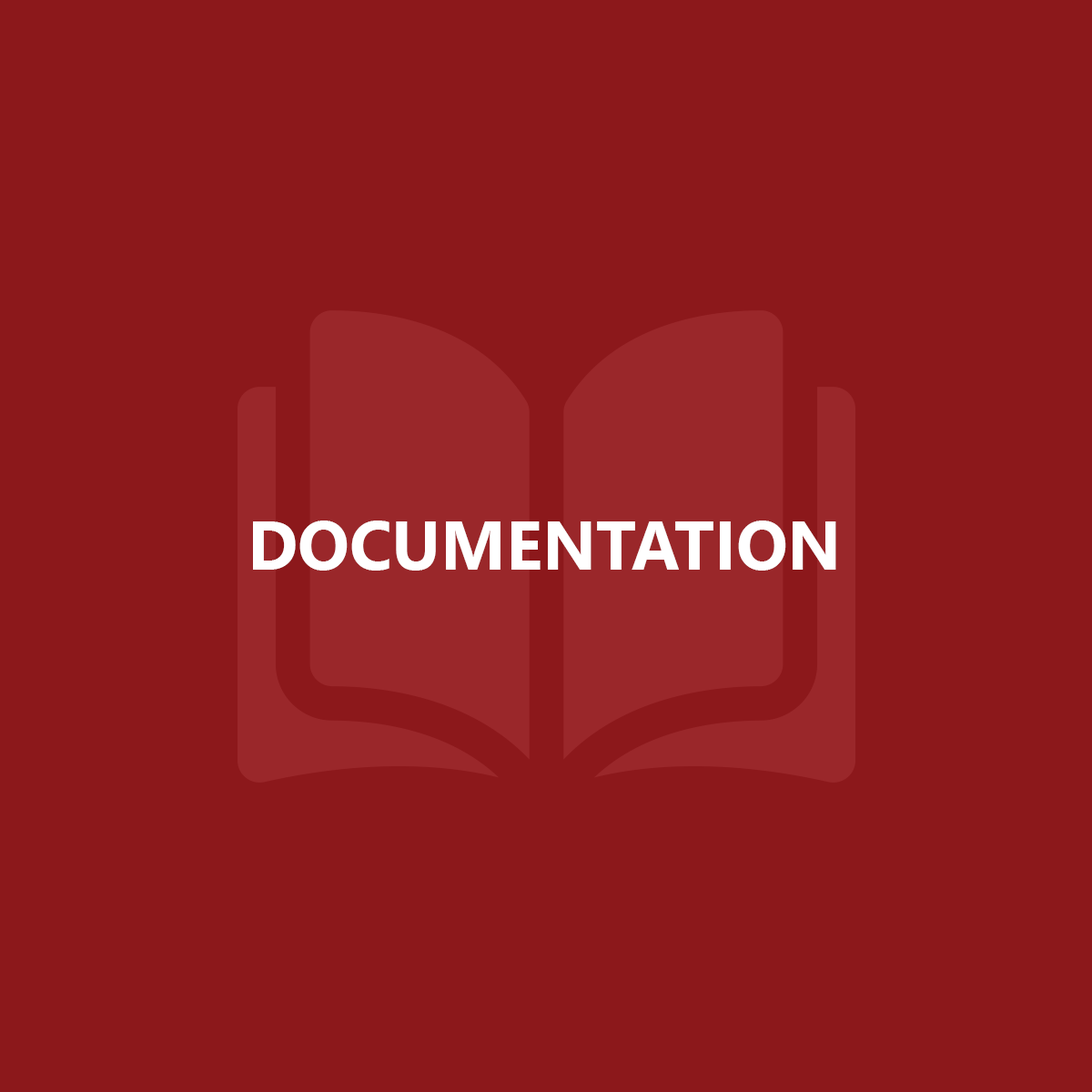
<style>
.page{position:relative;width:1092px;height:1092px;background:#8c181b}
.page>*{position:absolute;margin:0}
.t1{font:68.1px "SegoeUI-Bold";color:#ffffff}
</style>
<div class="page">
<p class="t1" style="left:253px;top:521px;width:583px;height:50px">DOCUMENTATION</p>
</div>
